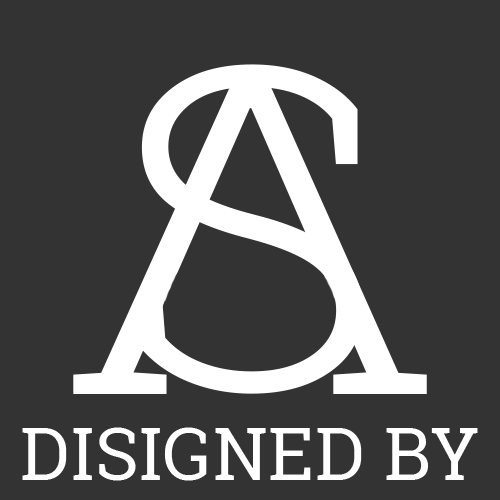
<style>
.page{position:relative;width:500px;height:500px;background:#333333}
.page>*{position:absolute;margin:0}
.t1{font:72px "RobotoSlab-Regular";letter-spacing:0.01em;color:#ffffff}
</style>
<div class="page">
<p class="t1" style="left:22px;top:427px;width:456px;height:54px">DISIGNED BY</p>
</div>
